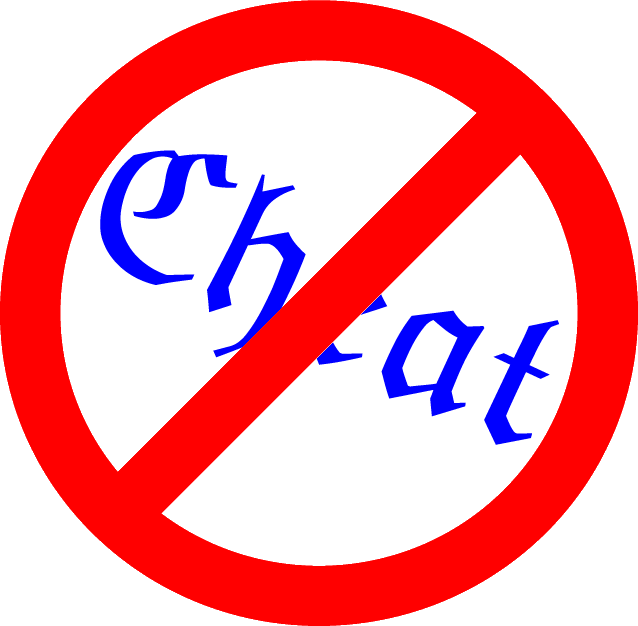
<style>
.page{position:relative;width:638px;height:626px;background:#ffffff}
.page>*{position:absolute;margin:0}
.t1{font:210px "EuclidFraktur";color:#0000ff}
</style>
<div class="page">
<p class="t1" style="left:100px;top:150px;width:459px;height:295px;rotate:25deg">Cheat</p>
</div>
